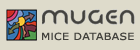
<style>
.page{position:relative;width:140px;height:50px;background:#dedbcb}
.page>*{position:absolute;margin:0}
.t1{font:9.9px "Verdana";letter-spacing:0.03em;color:#42413d;scale:1.11 1}
.t2{font:9.9px "ArialMT";letter-spacing:0.03em;color:#42413d;scale:1.11 1}
</style>
<div class="page">
<p class="t1" style="left:42px;top:32px;width:92px;height:9px">M<span class="t2">I</span>CE DATABASE</p>
</div>
